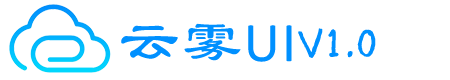
<style>
.page{position:relative;width:450px;height:80px;background:#ffffff}
.page>*{position:absolute;margin:0}
.t1{font:36px "AxureHandwriting";letter-spacing:0.04em;color:#0090ff}
.t2{font:60px "LiSu";letter-spacing:0.04em;color:#0090ff}
.t3{font:56px "Calibri";letter-spacing:0.04em;color:#0090ff}
</style>
<div class="page">
<p class="t1" style="left:121px;top:23px;width:255px;height:39px"><span class="t2">云雾</span><span class="t3">UI</span>V1.0</p>
</div>
